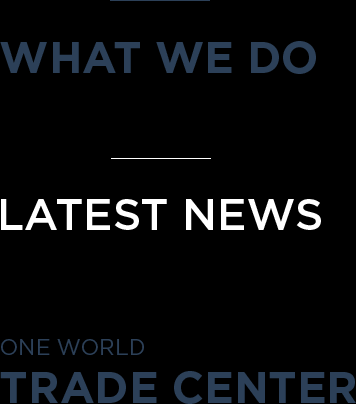
<style>
.page{position:relative;width:356px;height:404px;background:#000000}
.page>*{position:absolute;margin:0}
.t1{font:44px "Gotham-Bold";color:#2c4058;text-transform:uppercase}
.t2{font:44px "Gotham-Medium";color:#ffffff;text-transform:uppercase}
.t3{font:44px/24px "Gotham-Bold";color:#2c4058;text-transform:uppercase}
.t4{font:22px/24px "Gotham-Book";color:#2c4058;text-transform:uppercase}
</style>
<div class="page">
<p class="t1" style="left:0px;top:41px;width:316px;height:33px">what we do</p>
<p class="t2" style="left:1px;top:199px;width:320px;height:31px">latest news</p>
<p class="t3" style="left:0px;top:339px;width:356px;height:65px"><span class="t4">One World<br></span>Trade Center</p>
</div>
